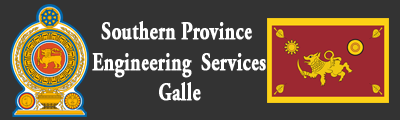
<style>
.page{position:relative;width:400px;height:120px;background:#333333}
.page>*{position:absolute;margin:0}
.t1{font:25.7px "AGaramondPro-Bold";color:#ffffff;font-weight:bold;scale:0.73 1}
</style>
<div class="page">
<p class="t1" style="left:92px;top:21px;width:174px;height:80px;text-align:center">Southern Province <br>Engineering  Services<br>Galle</p>
</div>
